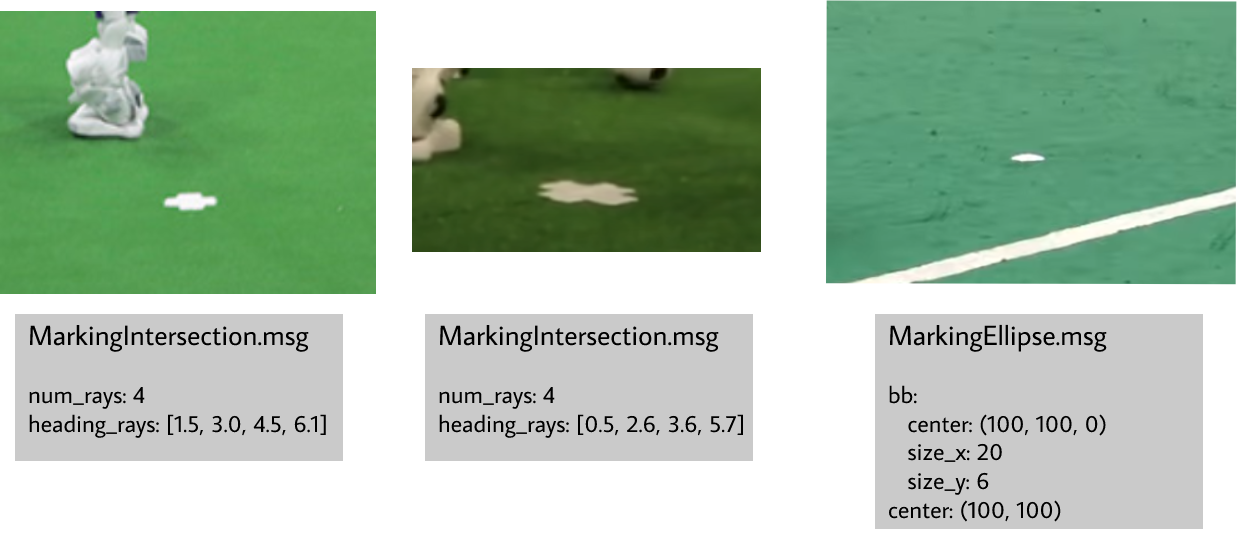
<style>
.page{position:relative;width:1237px;height:536px;background:#ffffff}
.page>*{position:absolute;margin:0}
.t1{font:24px "AverageSans-Regular";color:#000000}
.t2{font:28px "AverageSans-Regular";color:#000000}
</style>
<div class="page">
<p class="t1" style="left:29px;top:324px;width:297px;height:114px"><span class="t2">MarkingIntersection.msg<br><br></span>num_rays: 4<br>heading_rays: [1.5, 3.0, 4.5, 6.1]</p>
<p class="t1" style="left:439px;top:324px;width:304px;height:114px"><span class="t2">MarkingIntersection.msg<br><br></span>num_rays: 4<br>heading_rays: [0.5, 2.6, 3.6, 5.7]</p>
<p class="t1" style="left:888px;top:324px;width:219px;height:198px"><span class="t2">MarkingEllipse.msg<br><br></span>bb:<br>   center: (100, 100, 0)<br>   size_x: 20<br>   size_y: 6<br>center: (100, 100)</p>
</div>
